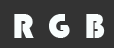
<style>
.page{position:relative;width:114px;height:48px;background:#333333}
.page>*{position:absolute;margin:0}
.t1{font:36px "Bauhaus93";letter-spacing:0.4em;color:#f8fdfd}
</style>
<div class="page">
<p class="t1" style="left:14px;top:14px;width:91px;height:24px">RGB</p>
</div>
